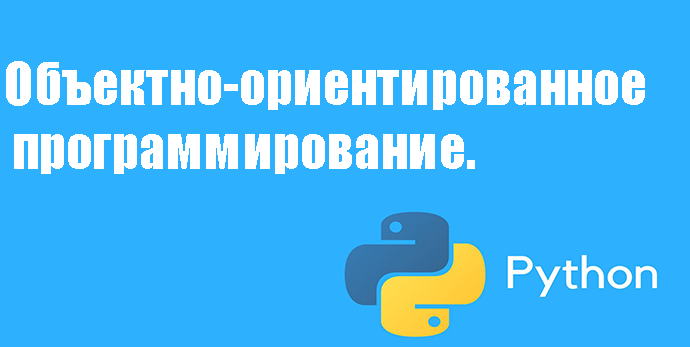
<style>
.page{position:relative;width:690px;height:347px;background:#2db0fe}
.page>*{position:absolute;margin:0}
.t1{font:53.9px "Impact";color:#ffffff}
</style>
<div class="page">
<p class="t1" style="left:6px;top:61px;width:639px;height:113px">Объектно-ориентированное<br> программирование.</p>
</div>
